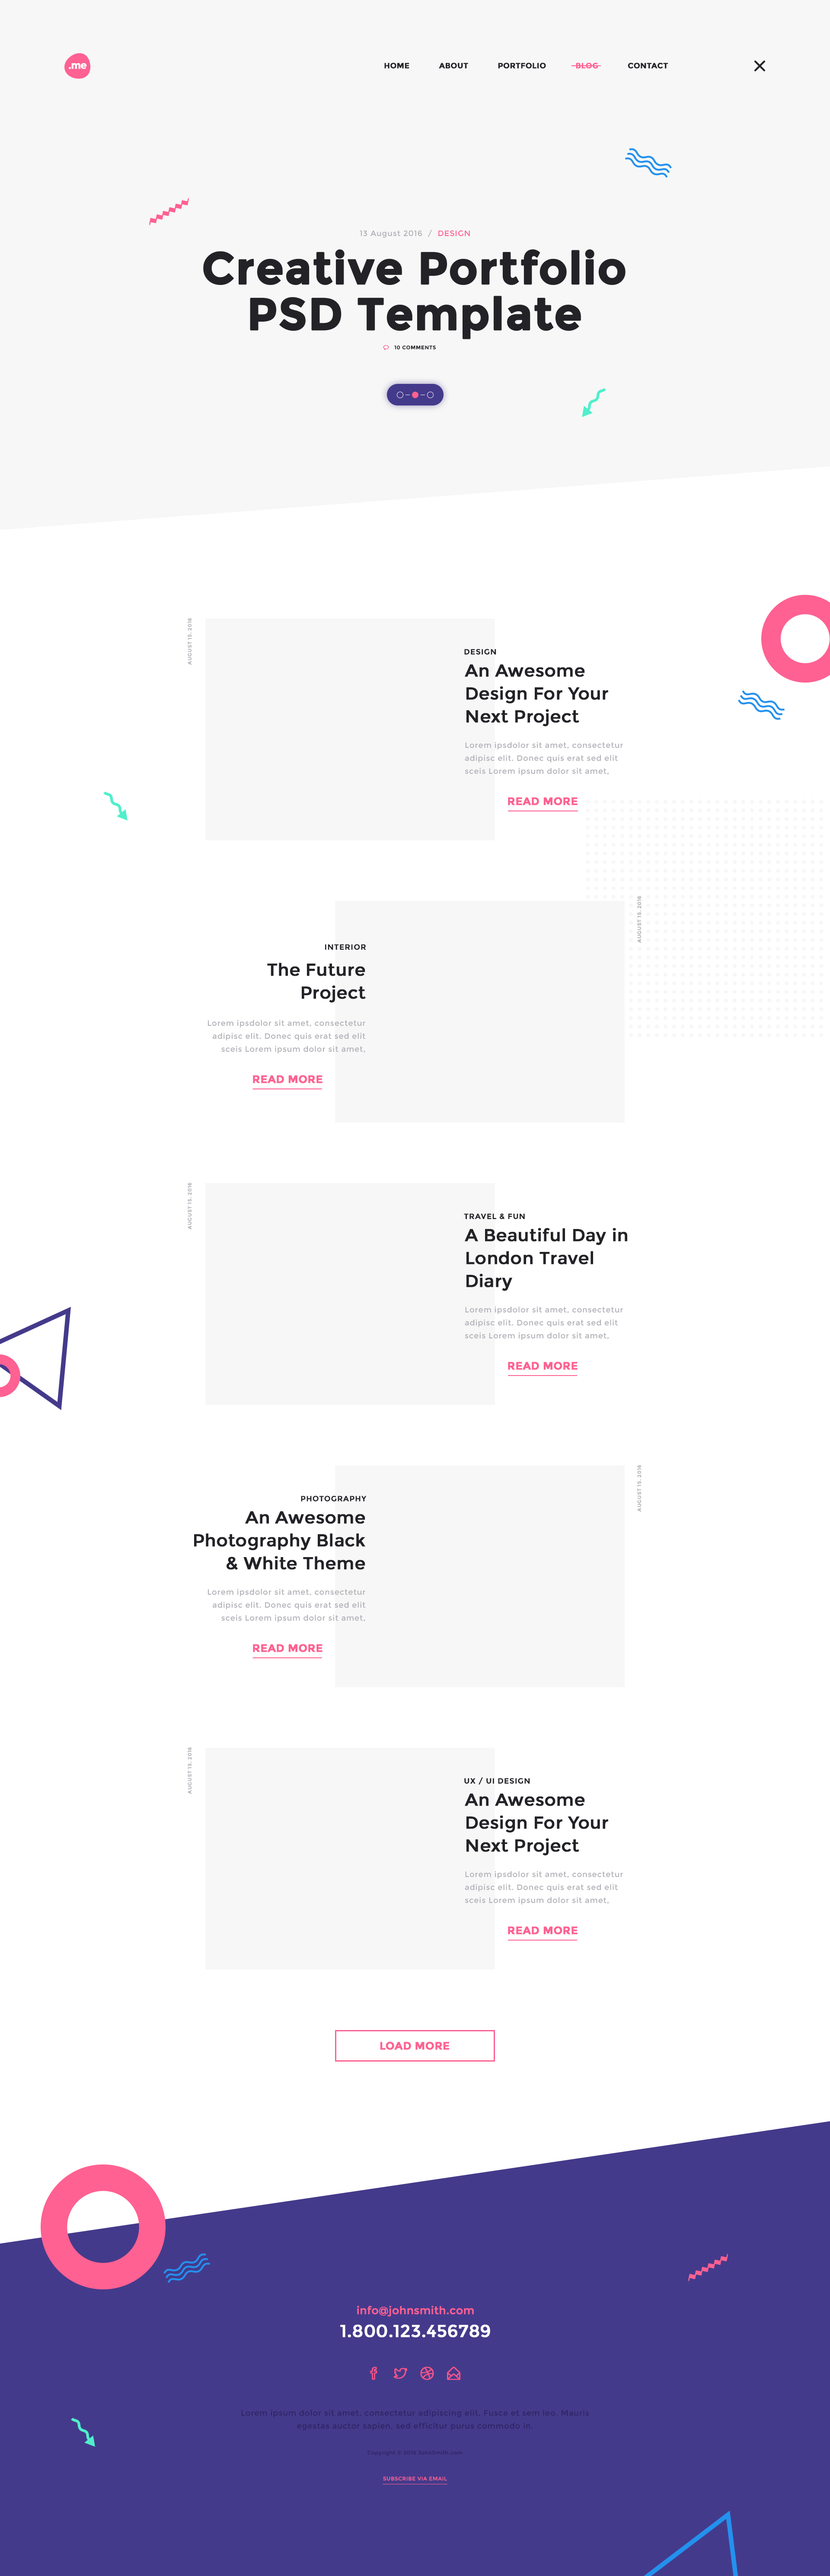
<style>
.page{position:relative;width:830px;height:2576px;background:#ffffff}
.page>*{position:absolute;margin:0}
.t1{font:10.2px "Montserrat-Bold";letter-spacing:-0.06em;color:#ffffff;font-weight:bold}
.t2{font:7.8px "Montserrat-Bold";color:#232227;text-transform:uppercase;font-weight:bold}
.t3{font:7.8px "Montserrat-Bold";color:#fe6192;text-transform:uppercase;font-weight:bold}
.t4{font:7.8px "Montserrat-Regular";letter-spacing:0.05em;color:#b2b1b8}
.t5{font:7.8px "Montserrat-Regular";letter-spacing:0.05em;color:#fe6192}
.t6{font:45px/45.8px "Montserrat-Bold";color:#232227;font-weight:bold}
.t7{font:5.2px "Montserrat-Bold";letter-spacing:0.05em;color:#232227}
.t8{font:5.1px "Montserrat-Bold";letter-spacing:0.05em;color:#b2b1b8}
.t9{font:7.8px "Montserrat-Bold";letter-spacing:0.05em;color:#232227}
.t10{font:17.3px/22.9px "Montserrat-Regular";color:#232227;font-weight:bold}
.t11{font:7.8px/13px "Montserrat-Regular";letter-spacing:0.05em;color:#b2b1b8}
.t12{font:10.8px "Montserrat-Bold";color:#fe6192;text-transform:uppercase;font-weight:bold}
.t13{font:10.8px/22.9px "Montserrat-Regular";color:#fe6192;font-weight:bold}
.t14{font:17.3px/22.9px "Montserrat-Regular";color:#ffffff;font-weight:bold}
.t15{font:7.8px/13px "Montserrat-Regular";letter-spacing:0.05em;color:#2d2464}
.t16{font:5.2px/13px "Montserrat-Regular";letter-spacing:0.05em;color:#2d2464}
.t17{font:5.2px/13px "Montserrat-Regular";letter-spacing:0.05em;color:#fe6192}
</style>
<div class="page">
<p class="t1" style="left:69px;top:63px;width:18px;height:6px">.me</p>
<p class="t2" style="left:384px;top:63px;width:284px;height:6px">HOME             ABOUT             PORTFOLIO             <span class="t3">BLOG</span>             CONTACT</p>
<p class="t4" style="left:360px;top:230px;width:110px;height:8px">13 August 2016  /  <span class="t5">DESIGN</span></p>
<p class="t6" style="left:203px;top:249px;width:423px;height:90px;text-align:center">Creative Portfolio<br>PSD Template</p>
<p class="t7" style="left:394px;top:345px;width:42px;height:5px">10 COMMENTS</p>
<p class="t8" style="left:188px;top:618px;width:4px;height:47px;rotate:-90deg">AUGUST 15. 2016</p>
<p class="t9" style="left:464px;top:649px;width:32px;height:6px">DESIGN</p>
<p class="t10" style="left:465px;top:664px;width:143px;height:62px">An Awesome Design For Your Next Project</p>
<p class="t11" style="left:465px;top:742px;width:158px;height:34px">Lorem ipsdolor sit amet, consectetur adipisc elit. Donec quis erat sed elit sceis Lorem ipsum dolor sit amet,</p>
<p class="t12" style="left:508px;top:797px;width:70px;height:8px">REaD MORE</p>
<p class="t8" style="left:637px;top:896px;width:5px;height:47px;rotate:-90deg">AUGUST 15. 2016</p>
<p class="t9" style="left:325px;top:944px;width:41px;height:6px">INTERIOR</p>
<p class="t10" style="left:267px;top:963px;width:99px;height:39px;text-align:right">The Future<br>Project</p>
<p class="t11" style="left:207px;top:1020px;width:159px;height:33px;text-align:right">Lorem ipsdolor sit amet, consectetur adipisc elit. Donec quis erat sed elit sceis Lorem ipsum dolor sit amet,</p>
<p class="t12" style="left:253px;top:1075px;width:69px;height:8px">REaD MORE</p>
<p class="t8" style="left:188px;top:1182px;width:4px;height:47px;rotate:-90deg">AUGUST 15. 2016</p>
<p class="t9" style="left:464px;top:1213px;width:61px;height:6px">TRAVEL &amp; FUN</p>
<p class="t10" style="left:465px;top:1228px;width:162px;height:63px">A Beautiful Day in London Travel Diary</p>
<p class="t11" style="left:465px;top:1306px;width:158px;height:34px">Lorem ipsdolor sit amet, consectetur adipisc elit. Donec quis erat sed elit sceis Lorem ipsum dolor sit amet,</p>
<p class="t12" style="left:508px;top:1362px;width:70px;height:8px">REaD MORE</p>
<p class="t8" style="left:637px;top:1465px;width:5px;height:47px;rotate:-90deg">AUGUST 15. 2016</p>
<p class="t9" style="left:301px;top:1496px;width:66px;height:6px">PHOTOGRAPHY</p>
<p class="t10" style="left:194px;top:1511px;width:171px;height:59px;text-align:right">An Awesome Photography Black &amp; White Theme</p>
<p class="t11" style="left:207px;top:1589px;width:159px;height:33px;text-align:right">Lorem ipsdolor sit amet, consectetur adipisc elit. Donec quis erat sed elit sceis Lorem ipsum dolor sit amet,</p>
<p class="t12" style="left:253px;top:1644px;width:69px;height:8px">REaD MORE</p>
<p class="t8" style="left:188px;top:1747px;width:4px;height:47px;rotate:-90deg">AUGUST 15. 2016</p>
<p class="t9" style="left:464px;top:1777px;width:66px;height:7px">UX / UI DESIGN</p>
<p class="t10" style="left:465px;top:1794px;width:143px;height:61px">An Awesome Design For Your Next Project</p>
<p class="t11" style="left:465px;top:1871px;width:158px;height:34px">Lorem ipsdolor sit amet, consectetur adipisc elit. Donec quis erat sed elit sceis Lorem ipsum dolor sit amet,</p>
<p class="t12" style="left:508px;top:1926px;width:70px;height:8px">REaD MORE</p>
<p class="t12" style="left:380px;top:2042px;width:70px;height:8px">load more</p>
<p class="t13" style="left:340px;top:2306px;width:150px;height:31px;text-align:center">info@johnsmith.com<br><span class="t14">1.800.123.456789</span></p>
<p class="t15" style="left:241px;top:2410px;width:348px;height:71px;text-align:center">Lorem ipsum dolor sit amet, consectetur adipiscing elit. Fusce et sem leo. Mauris egestas auctor sapien, sed efficitur purus commodo in. <br><br><span class="t16">Copyright © 2016 JohnSmith.com<br><br></span><span class="t17">SUBSCRIBE VIA EMAIL</span></p>
</div>
